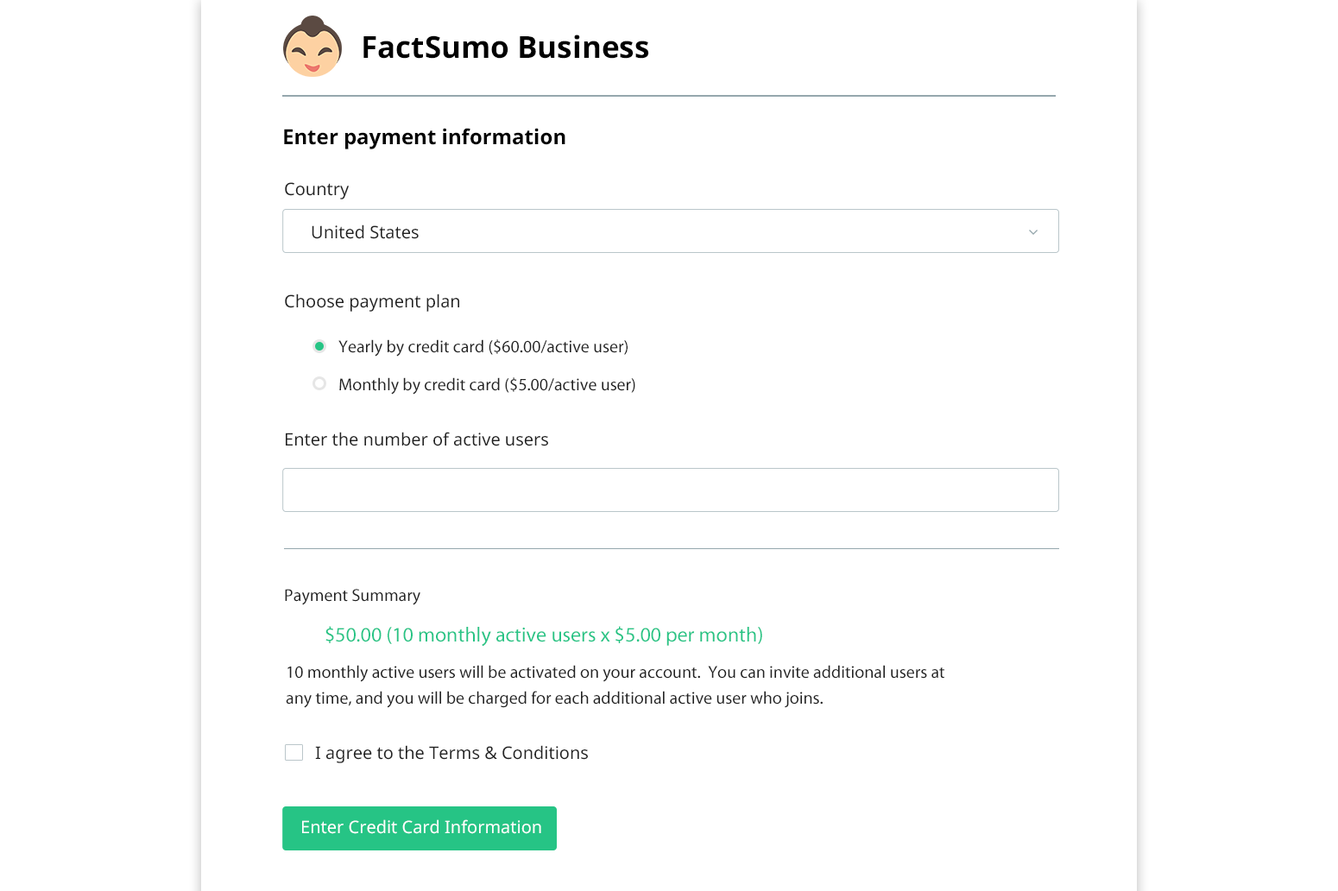
<style>
.page{position:relative;width:1338px;height:891px;background:#ffffff}
.page>*{position:absolute;margin:0}
.t1{font:30.2px "NotoSans-Bold";color:#000000}
.t2{font:20.7px "NotoSans-Bold";color:#000000}
.t3{font:17.3px "NotoSans";color:#222222}
.t4{font:17.3px "MyriadPro-Regular";color:#222222}
.t5{font:20.7px "MyriadPro-Regular";color:#26c485}
.t6{font:17.3px/25.9px "MyriadPro-Regular";color:#222222}
.t7{font:17.3px "NotoSans";color:#ffffff}
</style>
<div class="page">
<p class="t1" style="left:363px;top:35px;width:286px;height:24px">FactSumo Business</p>
<p class="t2" style="left:284px;top:128px;width:282px;height:21px">Enter payment information</p>
<p class="t3" style="left:285px;top:182px;width:65px;height:17px">Country</p>
<p class="t3" style="left:312px;top:224px;width:107px;height:15px">United States</p>
<p class="t3" style="left:285px;top:294px;width:174px;height:18px">Choose payment plan</p>
<p class="t4" style="left:338px;top:339px;width:290px;height:18px">Yearly by credit card ($60.00/active user)</p>
<p class="t4" style="left:339px;top:377px;width:296px;height:18px">Monthly by credit card ($5.00/active user)</p>
<p class="t3" style="left:286px;top:432px;width:262px;height:14px">Enter the number of active users</p>
<p class="t4" style="left:285px;top:589px;width:135px;height:16px">Payment Summary</p>
<p class="t5" style="left:326px;top:626px;width:436px;height:21px">$50.00 (10 monthly active users x $5.00 per month)</p>
<p class="t6" style="left:286px;top:665px;width:659px;height:43px">10 monthly active users will be activated on your account.  You can invite additional users at <br>any time, and you will be charged for each additional active user who joins.</p>
<p class="t3" style="left:315px;top:745px;width:273px;height:18px">I agree to the Terms &amp; Conditions</p>
<p class="t7" style="left:302px;top:819px;width:239px;height:15px">Enter Credit Card Information</p>
</div>
